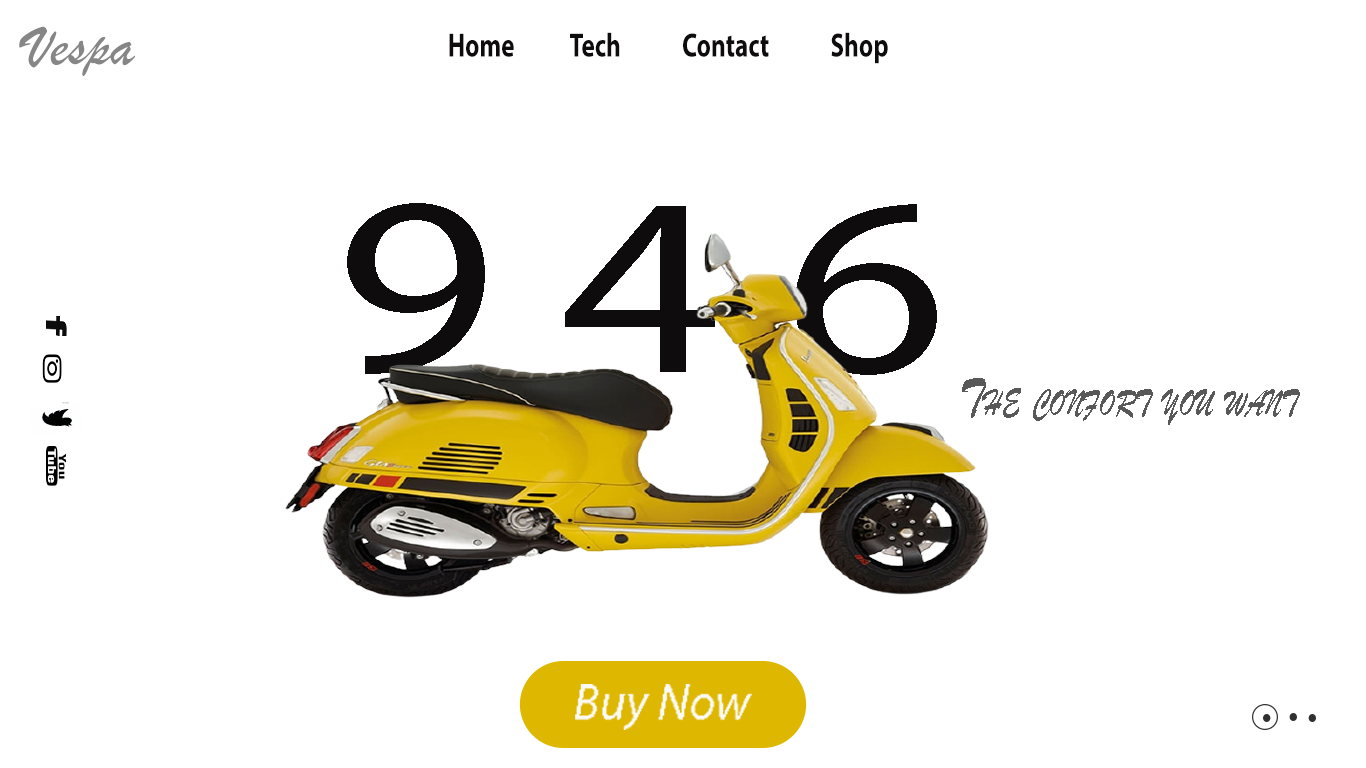
<style>
.page{position:relative;width:1366px;height:768px;background:#ffffff}
.page>*{position:absolute;margin:0}
.t1{font:59.3px "BrushScriptMT";color:#868686}
.t2{font:33.6px "MyriadPro-Bold";color:#0e0c0c;scale:0.75 1}
.t3{font:255.2px "MyriadPro-Regular";letter-spacing:0.2em;color:#0e0c0c;scale:1.24 1}
.t4{font:57.4px "BrushScriptMT";color:#585858;font-variant:small-caps;scale:0.72 1}
</style>
<div class="page">
<p class="t1" style="left:19px;top:26px;width:116px;height:50px">Vespa</p>
<p class="t2" style="left:449px;top:32px;width:439px;height:32px">Home           Tech            Contact            Shop</p>
<p class="t3" style="left:347px;top:203px;width:590px;height:172px">946</p>
<p class="t4" style="left:962px;top:378px;width:338px;height:47px">The confort you want</p>
</div>
